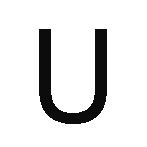
<style>
.page{position:relative;width:147px;height:147px;background:#ffffff}
.page>*{position:absolute;margin:0}
.t1{font:128px "Tahoma";letter-spacing:0.2em;color:#0c0c0c}
</style>
<div class="page">
<p class="t1" style="left:39px;top:29px;width:68px;height:95px">U</p>
</div>
